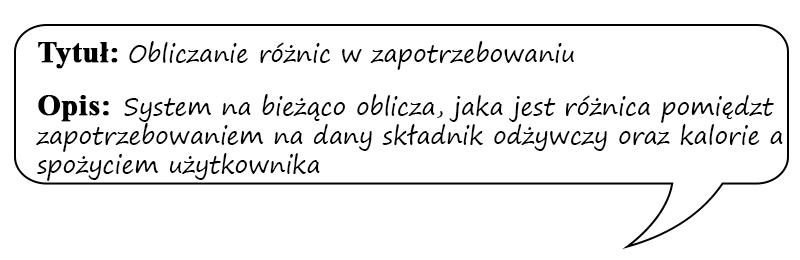
<style>
.page{position:relative;width:800px;height:260px;background:#ffffff}
.page>*{position:absolute;margin:0}
.t1{font:24px "SegoePrint";color:#000000}
.t2{font:30px "TimesNewRomanPS-BoldMT";color:#000000;font-weight:bold}
</style>
<div class="page">
<p class="t1" style="left:36px;top:41px;width:747px;height:140px"><span class="t2">Tytuł: </span>Obliczanie różnic w zapotrzebowaniu<br><br><span class="t2">Opis:  </span>System na bieżąco oblicza, jaka jest różnica pomiędzt zapotrzebowaniem na dany składnik odżywczy oraz kalorie a spożyciem użytkownika</p>
</div>
